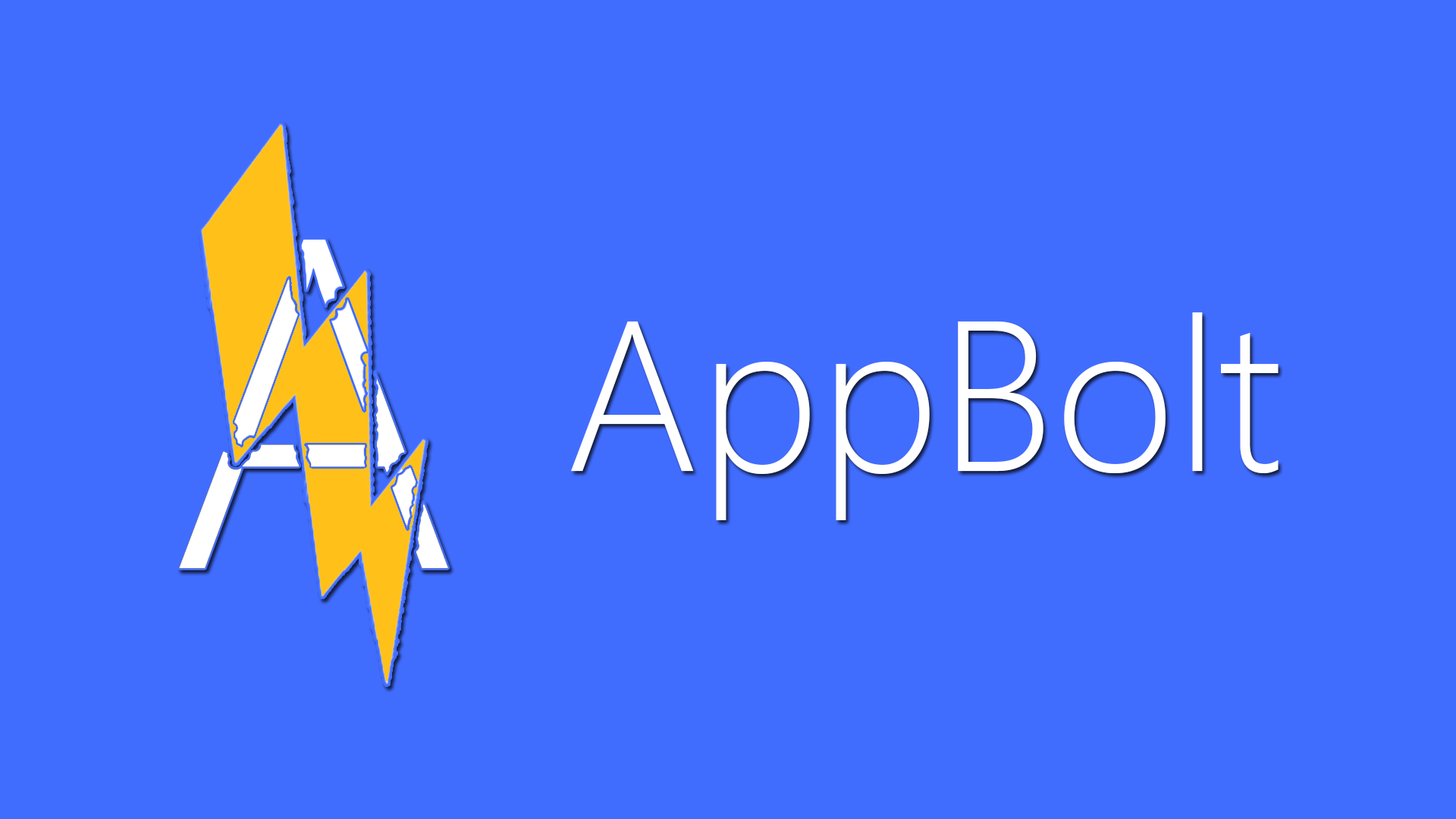
<style>
.page{position:relative;width:1456px;height:819px;background:#416dff}
.page>*{position:absolute;margin:0}
.t1{font:213.8px "SegoeUI-Light";color:#ffffff}
</style>
<div class="page">
<p class="t1" style="left:571px;top:312px;width:708px;height:208px">AppBolt</p>
</div>
